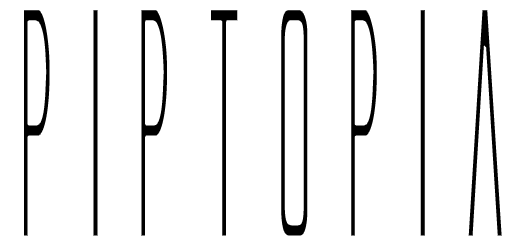
<style>
.page{position:relative;width:526px;height:242px;background:#ffffff}
.page>*{position:absolute;margin:0}
.t1{font:300px "AlienLeague";letter-spacing:0.1em;color:#000000;font-weight:bold;scale:0.4 1}
</style>
<div class="page">
<p class="t1" style="left:23px;top:9px;width:480px;height:228px">Piptopia</p>
</div>
